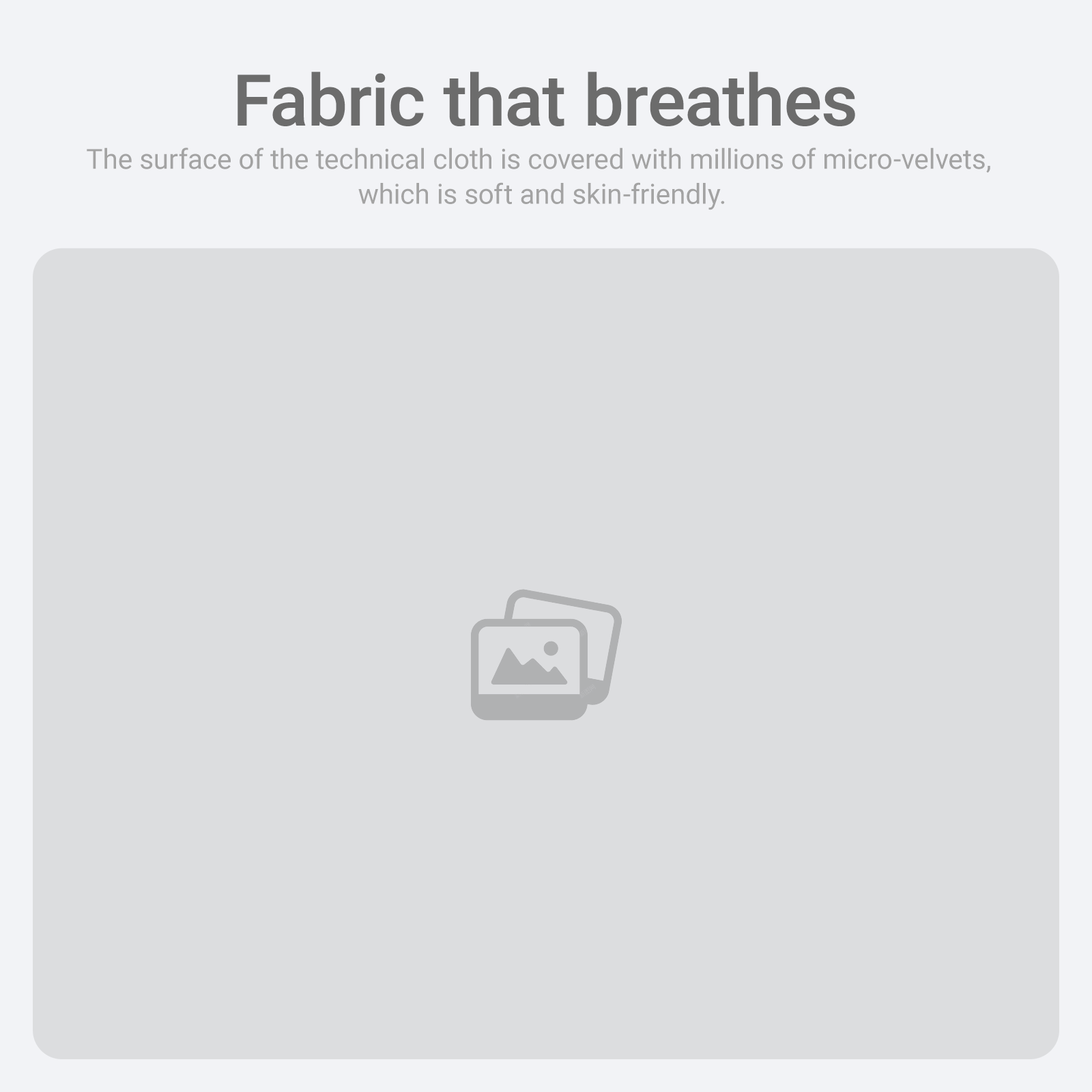
<style>
.page{position:relative;width:1092px;height:1092px;background:#dcdddf}
.page>*{position:absolute;margin:0}
.t1{font:71.3px "Roboto-Medium";color:#6c6c6c}
.t2{font:27.7px/34.9px "Roboto-Regular";color:#a3a3a3}
</style>
<div class="page">
<p class="t1" style="left:238px;top:72px;width:617px;height:54px">Fabric that breathes</p>
<p class="t2" style="left:87px;top:147px;width:903px;height:63px;text-align:center">The surface of the technical cloth is covered with millions of micro-velvets, <br>which is soft and skin-friendly.</p>
</div>
